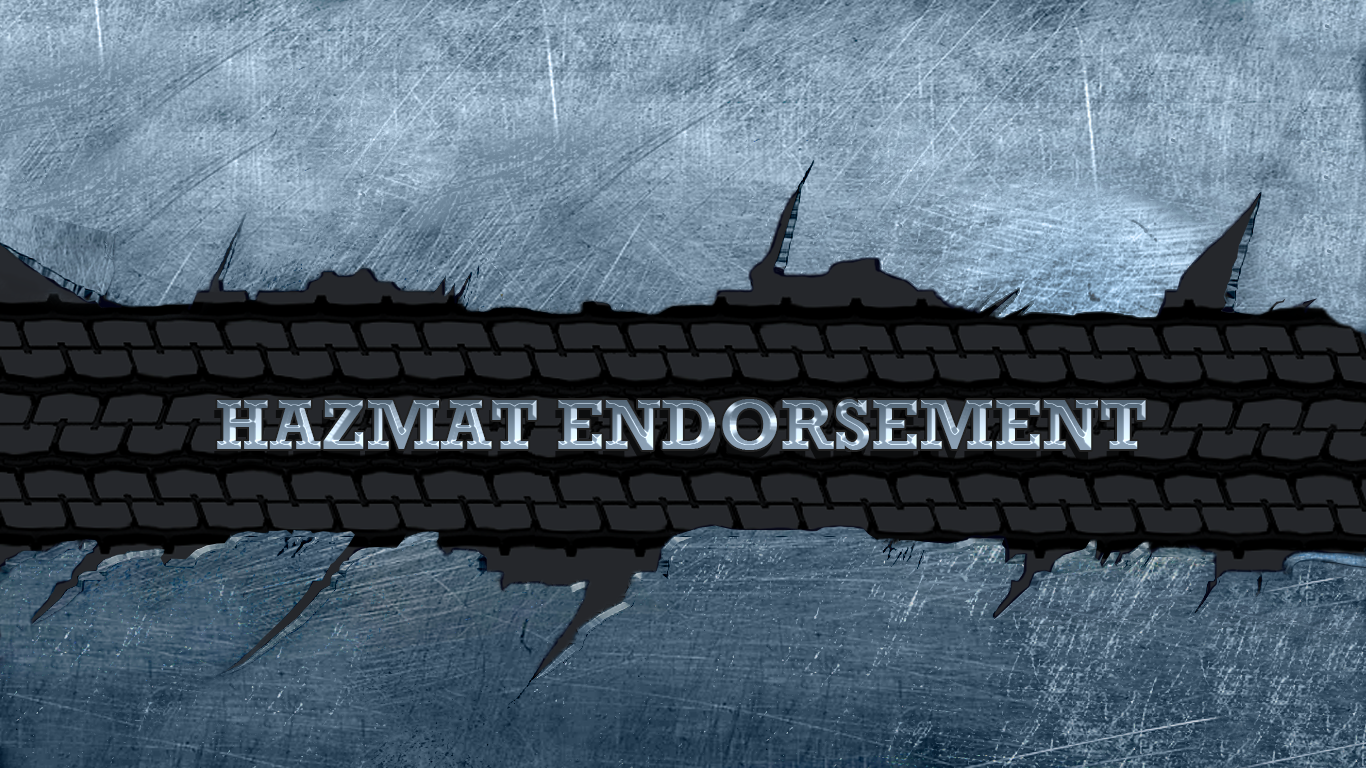
<style>
.page{position:relative;width:1366px;height:768px}
.page>*{position:absolute;margin:0}
.t1{font:72px "Rockwell-Bold"}
.t2{font:12px "Rockwell-Bold"}
</style>
<div class="page">
<p class="t1" style="left:217px;top:399px;width:929px;height:51px"><span class="t2"><br></span>HAZMAT ENDORSEMENT</p>
</div>
